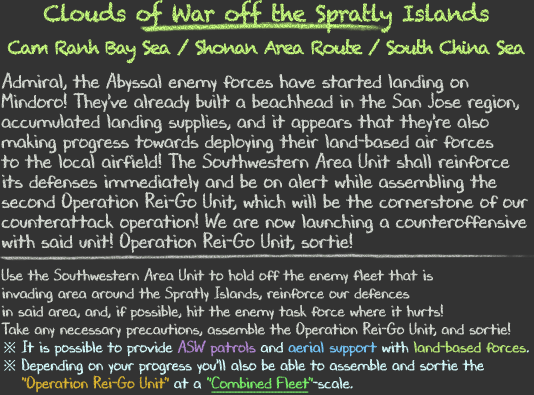
<style>
.page{position:relative;width:534px;height:395px;background:#333333}
.page>*{position:absolute;margin:0}
.t1{font:18px/36px "Chalkduster";letter-spacing:-0.09em}
.t2{font:22px/36px "Chalkduster";letter-spacing:-0.04em}
.t3{font:20px/20px "DJBChalkItUp";color:#d9ded6}
.t4{font:16px/18px "DJBChalkItUp";color:#d9ded6}
.t5{font:16px/18px "TimesNewRomanPSMT";color:#d7feff}
.t6{font:16px/18px "DJBChalkItUp";color:#d7feff}
.t7{font:16px/18px "DJBChalkItUp";color:#b489d6}
.t8{font:16px/18px "DJBChalkItUp";color:#76c8fb}
.t9{font:16px/18px "DJBChalkItUp";color:#bdef78}
.t10{font:16px/18px "DJBChalkItUp";color:#dfb731}
.t11{font:16px/18px "DJBChalkItUp";color:#7bf26b}
.t12{font:16px/18px "DJBChalkItUp";color:#7bf26b;text-decoration:underline}
</style>
<div class="page">
<p class="t1" style="left:7px;top:0px;width:518px;height:64px;text-align:center"><span class="t2">Clouds of War off the Spratly Islands<br></span>Cam Ranh Bay Sea / Shonan Area Route / South China Sea</p>
<p class="t3" style="left:0px;top:72px;width:529px;height:321px">Admiral, the Abyssal enemy forces have started landing on<br>Mindoro! They've already built a beachhead in the San Jose region,<br>accumulated landing supplies, and it appears that they're also<br>making progress towards deploying their land-based air forces<br>to the local airfield! The Southwestern Area Unit shall reinforce<br>its defenses immediately and be on alert while assembling the<br>second Operation Rei-Go Unit, which will be the cornerstone of our<br>counterattack operation! We are now launching a counteroffensive<br>with said unit! Operation Rei-Go Unit, sortie!<br><br><span class="t4">Use the Southwestern Area Unit to hold off the enemy fleet that is<br>invading area around the Spratly Islands, reinforce our defences<br>in said area, and, if possible, hit the enemy task force where it hurts!<br>Take any necessary precautions, assemble the Operation Rei-Go Unit, and sortie!<br></span><span class="t5">※ </span><span class="t6">It is possible to provide </span><span class="t7">ASW patrols</span><span class="t6"> and </span><span class="t8">aerial support</span><span class="t6"> with </span><span class="t9">land-based forces</span><span class="t6">.<br></span><span class="t5">※ </span><span class="t6">Depending on your progress you'll also be able to assemble and sortie the<br>　 </span><span class="t10">"Operation Rei-Go Unit"</span><span class="t6"> at a </span><span class="t11">"</span><span class="t12">Combined Fleet</span><span class="t11">"</span><span class="t6">-scale.</span></p>
</div>
